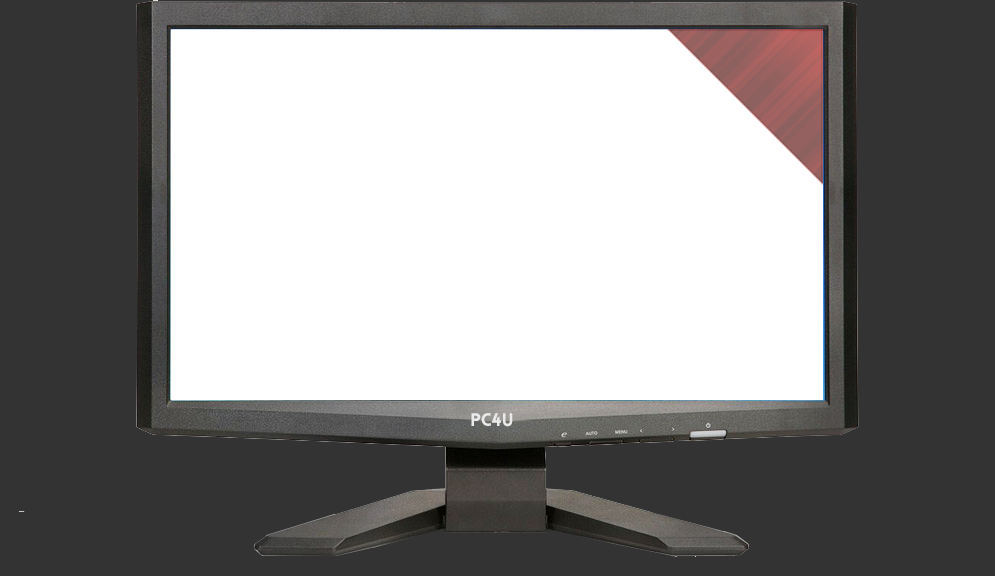
<style>
.page{position:relative;width:995px;height:576px;background:#333333}
.page>*{position:absolute;margin:0}
.t1{font:18px "LoveloBlack";color:#eaeaea}
</style>
<div class="page">
<p class="t1" style="left:471px;top:413px;width:42px;height:14px">pc4u</p>
</div>
